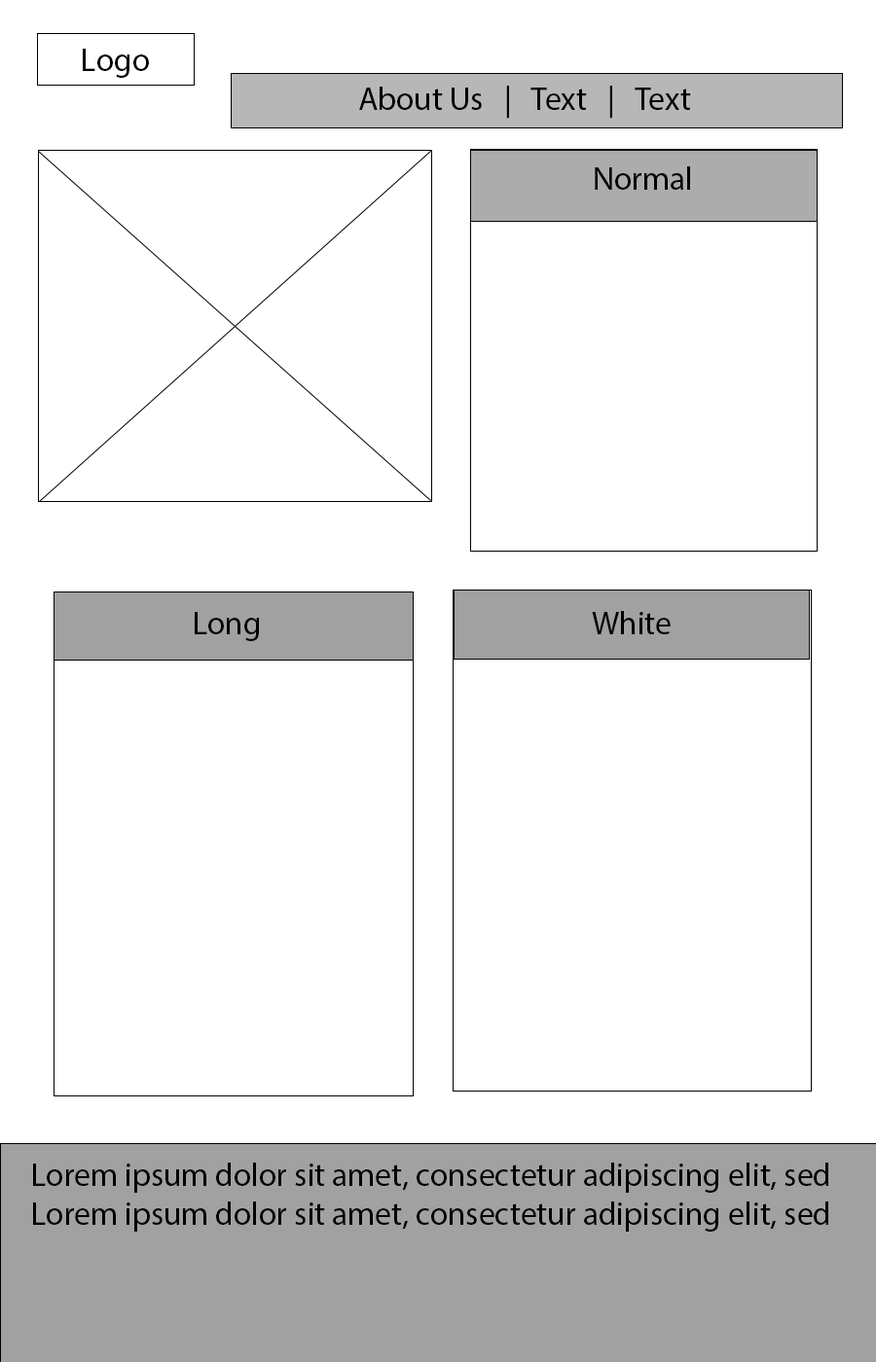
<style>
.page{position:relative;width:876px;height:1362px;background:#ffffff}
.page>*{position:absolute;margin:0}
.t1{font:32.4px "MyriadPro-Regular";color:#000000}
</style>
<div class="page">
<p class="t1" style="left:83px;top:49px;width:66px;height:29px">Logo</p>
<p class="t1" style="left:359px;top:86px;width:332px;height:33px">About Us   |   Text   |   Text</p>
<p class="t1" style="left:594px;top:166px;width:96px;height:24px">Normal</p>
<p class="t1" style="left:195px;top:612px;width:64px;height:29px">Long</p>
<p class="t1" style="left:591px;top:611px;width:79px;height:23px">White</p>
<p class="t1" style="left:33px;top:1163px;width:795px;height:69px">Lorem ipsum dolor sit amet, consectetur adipiscing elit, sed <br>Lorem ipsum dolor sit amet, consectetur adipiscing elit, sed</p>
</div>
